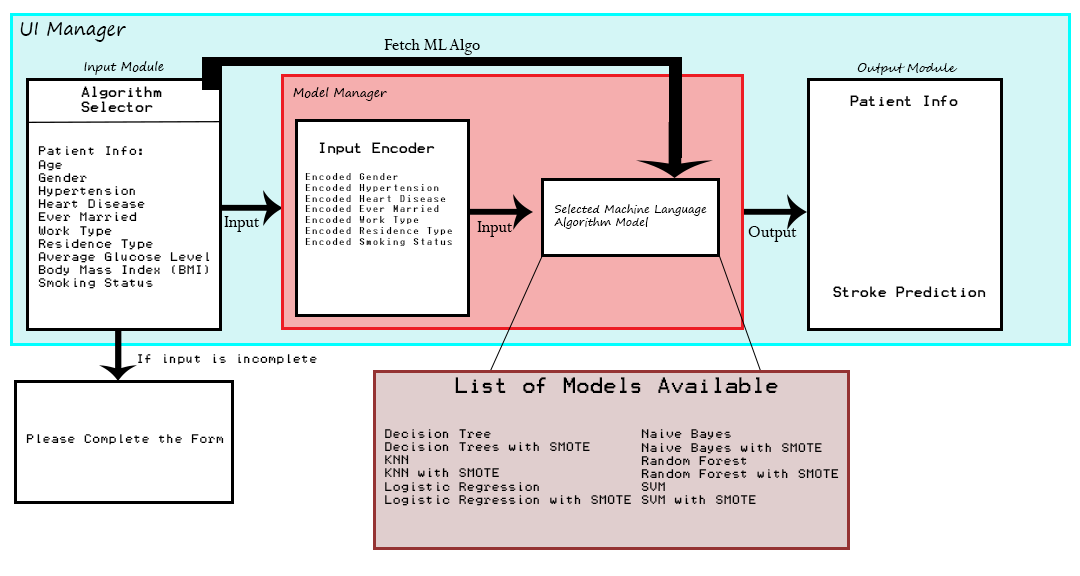
<style>
.page{position:relative;width:1080px;height:576px;background:#ffffff}
.page>*{position:absolute;margin:0}
.t1{font:18px "SegoePrint";color:#000000}
.t2{font:18px "Perpetua";color:#000000}
.t3{font:12px "SegoePrint";color:#000000}
.t4{font:12px "SegoeScript";color:#000000}
.t5{font:12px "Terminal";color:#000000}
.t6{font:11px "Terminal";color:#000000}
.t7{font:9px "Terminal";color:#000000}
.t8{font:11px "SegoePrint";color:#000000}
.t9{font:18px "Terminal";color:#000000}
</style>
<div class="page">
<p class="t1" style="left:20px;top:22px;width:106px;height:20px">UI Manager</p>
<p class="t2" style="left:384px;top:39px;width:96px;height:16px">Fetch ML Algo</p>
<p class="t3" style="left:84px;top:61px;width:80px;height:14px">Input Module</p>
<p class="t4" style="left:857px;top:63px;width:101px;height:12px">Output Module</p>
<p class="t5" style="left:81px;top:86px;width:81px;height:26px;text-align:right">Algorithm<br>Selector</p>
<p class="t3" style="left:293px;top:87px;width:94px;height:14px">Model Manager</p>
<p class="t5" style="left:850px;top:95px;width:108px;height:11px">Patient Info</p>
<p class="t6" style="left:38px;top:146px;width:172px;height:143px;text-align:right">Patient Info:<br>Age<br>Gender<br>Hypertension<br>Heart Disease<br>Ever Married<br>Work Type<br>Residence Type<br>Average Glucose Level<br>Body Mass Index (BMI)<br>Smoking Status</p>
<p class="t5" style="left:319px;top:142px;width:116px;height:13px">Input Encoder</p>
<p class="t7" style="left:305px;top:173px;width:147px;height:73px;text-align:right">Encoded Gender<br>Encoded Hypertension<br>Encoded Heart Disease<br>Encoded Ever Married<br>Encoded Work Type<br>Encoded Residence Type<br>Encoded Smoking Status</p>
<p class="t8" style="left:554px;top:204px;width:153px;height:25px;text-align:right">Selected Machine Language<br>Algorithm Model</p>
<p class="t2" style="left:224px;top:216px;width:36px;height:16px">Input</p>
<p class="t2" style="left:477px;top:221px;width:36px;height:16px">Input</p>
<p class="t2" style="left:748px;top:226px;width:49px;height:16px">Output</p>
<p class="t5" style="left:833px;top:286px;width:153px;height:11px">Stroke Prediction</p>
<p class="t6" style="left:138px;top:354px;width:179px;height:11px">If input is incomplete</p>
<p class="t9" style="left:455px;top:377px;width:323px;height:16px">List of Models Available</p>
<p class="t6" style="left:26px;top:434px;width:198px;height:11px">Please Complete the Form</p>
<p class="t6" style="left:385px;top:429px;width:246px;height:77px;text-align:right">Decision Tree<br>Decision Trees with SMOTE<br>KNN<br>KNN with SMOTE<br>Logistic Regression<br>Logistic Regression with SMOTE</p>
<p class="t6" style="left:641px;top:429px;width:198px;height:75px;text-align:right">Naive Bayes<br>Naive Bayes with SMOTE<br>Random Forest<br>Random Forest with SMOTE<br>SVM<br>SVM with SMOTE</p>
</div>
